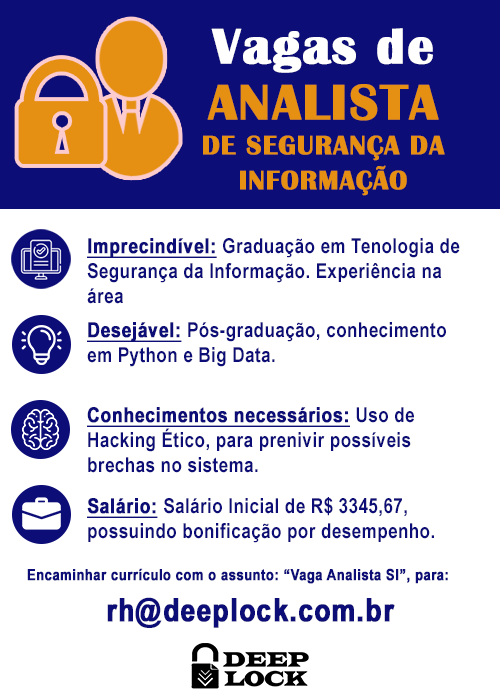
<style>
.page{position:relative;width:500px;height:700px;background:#ffffff}
.page>*{position:absolute;margin:0}
.t1{font:51.5px "BritannicBold";letter-spacing:0.02em;color:#ffffff;font-weight:bold}
.t2{font:27.3px/35.3px "BritannicBold";letter-spacing:0.02em;color:#e59012;font-weight:bold}
.t3{font:51.5px/35.3px "BritannicBold";letter-spacing:0.02em;color:#e59012;font-weight:bold}
.t4{font:20.8px "ArialNarrow-Bold";letter-spacing:0.02em;color:#0d0d78}
.t5{font:20.8px "ArialNarrow-Bold";letter-spacing:0.02em;color:#0d0d78;font-weight:bold;text-decoration:underline}
.t6{font:15.4px "ArialNarrow-Bold";letter-spacing:0.02em;color:#0d0d78;font-weight:bold}
.t7{font:32.1px "ArialNarrow-Bold";letter-spacing:0.02em;color:#0d0d78;font-weight:bold}
</style>
<div class="page">
<p class="t1" style="left:211px;top:28px;width:222px;height:45px">Vagas de</p>
<p class="t2" style="left:203px;top:84px;width:242px;height:112px;text-align:center"><span class="t3">ANALISTA<br></span>DE SEGURANÇA DA<br>INFORMAÇÃO</p>
<p class="t4" style="left:87px;top:238px;width:373px;height:66px"><span class="t5">Imprecindível: </span>Graduação em Tenologia de Segurança da Informação. Experiência na área</p>
<p class="t4" style="left:87px;top:322px;width:359px;height:45px"><span class="t5">Desejável: </span>Pós-graduação, conhecimento em Python e Big Data.</p>
<p class="t4" style="left:87px;top:407px;width:327px;height:66px"><span class="t5">Conhecimentos necessários: </span>Uso de Hacking Ético, para prenivir possíveis brechas no sistema.</p>
<p class="t4" style="left:87px;top:497px;width:347px;height:46px"><span class="t5">Salário: </span>Salário Inicial de R$ 3345,67, possuindo bonificação por desempenho.</p>
<p class="t6" style="left:27px;top:568px;width:421px;height:16px">Encaminhar currículo com o assunto: “Vaga Analista SI”, para:</p>
<p class="t7" style="left:107px;top:597px;width:288px;height:31px">rh@deeplock.com.br</p>
</div>
